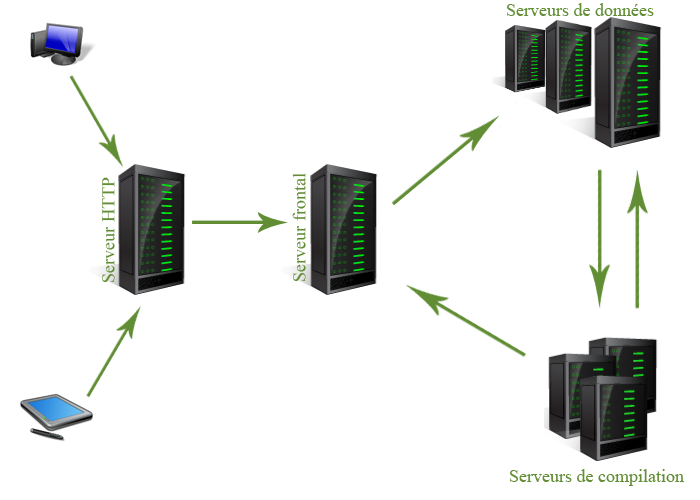
<style>
.page{position:relative;width:700px;height:500px;background:#ffffff}
.page>*{position:absolute;margin:0}
.t1{font:18px "TimesNewRomanPSMT";color:#618e34}
</style>
<div class="page">
<p class="t1" style="left:507px;top:3px;width:147px;height:13px">Serveurs de données</p>
<p class="t1" style="left:292px;top:173px;width:14px;height:109px;rotate:-90deg">Serveur frontal</p>
<p class="t1" style="left:101px;top:177px;width:14px;height:106px;rotate:-90deg">Serveur HTTP</p>
<p class="t1" style="left:510px;top:469px;width:174px;height:17px">Serveurs de compilation</p>
</div>
